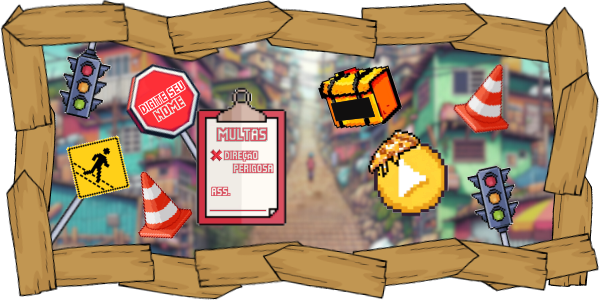
<style>
.page{position:relative;width:600px;height:300px}
.page>*{position:absolute;margin:0}
.t1{font:20px "ScreenLogger-Cool";color:#d94f5f}
.t2{font:14px "ScreenLogger-Cool";color:#d94f5f}
.t3{font:14px "ScreenLogger-Cool";color:#000000}
</style>
<div class="page">
<p class="t1" style="left:217px;top:127px;width:50px;height:14px">MULTAS</p>
<p class="t2" style="left:224px;top:150px;width:35px;height:12px">DIREÇÃO</p>
<p class="t2" style="left:233px;top:163px;width:41px;height:10px">PERIGOSA</p>
<p class="t2" style="left:211px;top:186px;width:20px;height:10px"><span class="t3">A</span>SS.</p>
</div>
